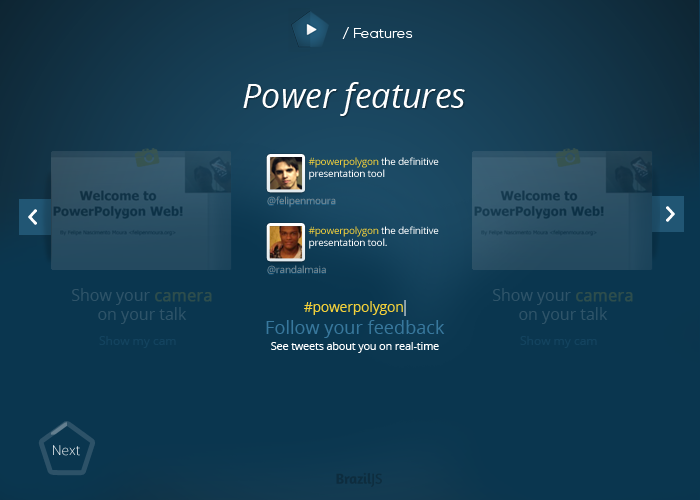
<style>
.page{position:relative;width:700px;height:500px;background:#0a364f}
.page>*{position:absolute;margin:0}
.t1{font:14px "NexaLight";color:#ffffff}
.t2{font:34px "OpenSans-Italic";color:#ffffff}
.t3{font:10px "OpenSans";letter-spacing:-0.025em;color:#ffffff}
.t4{font:10px "OpenSans";letter-spacing:-0.025em;color:#f2d03b}
.t5{font:10px "OpenSans";letter-spacing:-0.025em;color:#7b8c95}
.t6{font:16px "OpenSans"}
.t7{font:16px "OpenSans";font-weight:bold}
.t8{font:13.6px "OpenSans";color:#f2d03b}
.t9{font:18.1px "OpenSans";color:#38789d}
.t10{font:12px "OpenSans";color:#13435f}
.t11{font:10.6px "OpenSans";color:#ffffff}
.t12{font:13.6px "OpenSans-Light"}
</style>
<div class="page">
<p class="t1" style="left:342px;top:27px;width:71px;height:12px">/ Features</p>
<p class="t2" style="left:243px;top:82px;width:222px;height:34px">Power features</p>
<p class="t3" style="left:308px;top:157px;width:131px;height:23px"><span class="t4">#powerpolygon</span> the definitive presentation tool</p>
<p class="t5" style="left:267px;top:196px;width:69px;height:11px">@felipenmoura</p>
<p class="t3" style="left:308px;top:226px;width:131px;height:23px"><span class="t4">#powerpolygon</span> the definitive presentation tool.</p>
<p class="t5" style="left:267px;top:265px;width:59px;height:9px">@randalmaia</p>
<p class="t6" style="left:72px;top:288px;width:140px;height:36px;text-align:center">Show your <span class="t7">camera<br></span>on your talk</p>
<p class="t6" style="left:493px;top:288px;width:140px;height:36px;text-align:center">Show your <span class="t7">camera<br></span>on your talk</p>
<p class="t8" style="left:304px;top:301px;width:99px;height:14px">#powerpolygon</p>
<p class="t9" style="left:266px;top:320px;width:179px;height:18px">Follow your feedback</p>
<p class="t10" style="left:99px;top:336px;width:77px;height:12px">Show my cam</p>
<p class="t11" style="left:271px;top:342px;width:168px;height:11px">See tweets about you on real-time</p>
<p class="t10" style="left:520px;top:336px;width:77px;height:12px">Show my cam</p>
<p class="t12" style="left:53px;top:445px;width:27px;height:11px">Next</p>
</div>
